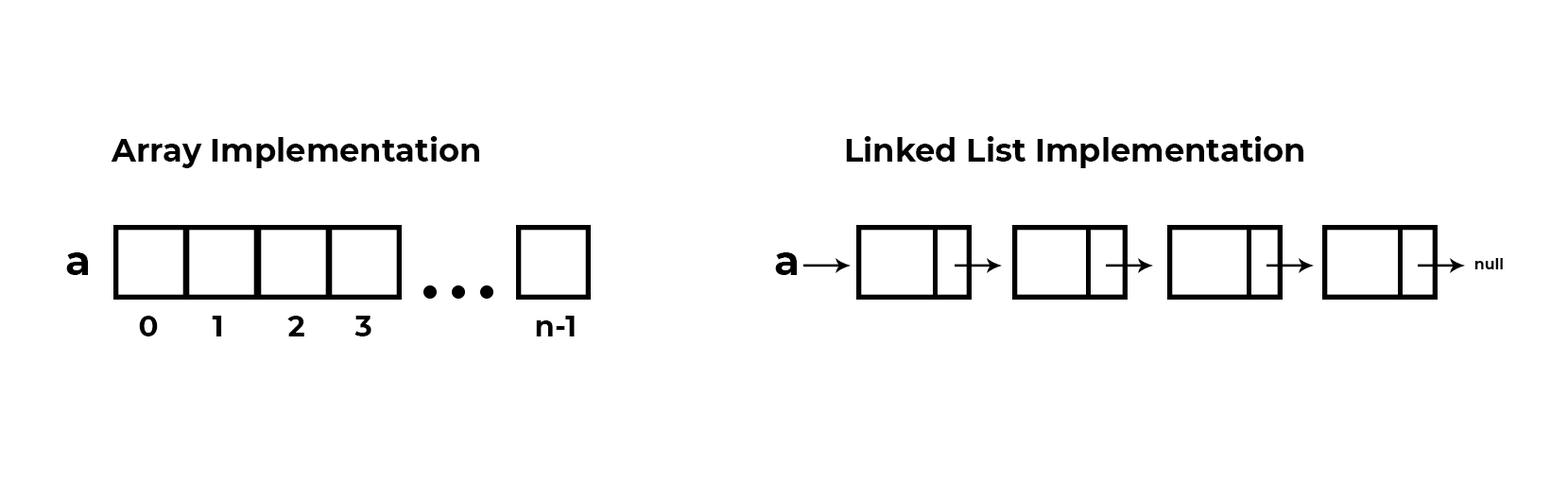
<style>
.page{position:relative;width:1568px;height:482px;background:#ffffff}
.page>*{position:absolute;margin:0}
.t1{font:32.2px "Montserrat-Bold";color:#000000}
.t2{font:41.5px "Montserrat-Bold";color:#000000}
.t3{font:15px "Montserrat-Bold";color:#000000}
.t4{font:28.8px "Montserrat-Bold";color:#000000}
</style>
<div class="page">
<p class="t1" style="left:111px;top:136px;width:368px;height:32px">Array Implementation</p>
<p class="t1" style="left:846px;top:136px;width:457px;height:32px">Linked List Implementation</p>
<p class="t2" style="left:66px;top:252px;width:22px;height:23px">a</p>
<p class="t2" style="left:775px;top:252px;width:22px;height:23px">a</p>
<p class="t3" style="left:1474px;top:258px;width:29px;height:11px">null</p>
<p class="t4" style="left:139px;top:316px;width:19px;height:20px">0</p>
<p class="t4" style="left:212px;top:316px;width:10px;height:20px">1</p>
<p class="t4" style="left:287px;top:316px;width:17px;height:20px">2</p>
<p class="t4" style="left:354px;top:316px;width:17px;height:20px">3</p>
<p class="t4" style="left:536px;top:316px;width:39px;height:20px">n-1</p>
</div>
